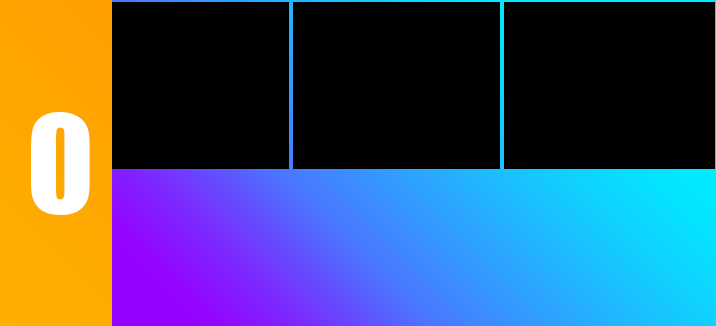
<style>
.page{position:relative;width:716px;height:326px;background:#000000}
.page>*{position:absolute;margin:0}
.t1{font:125px "Impact";color:#ffffff}
</style>
<div class="page">
<p class="t1" style="left:31px;top:112px;width:59px;height:103px">0</p>
</div>
